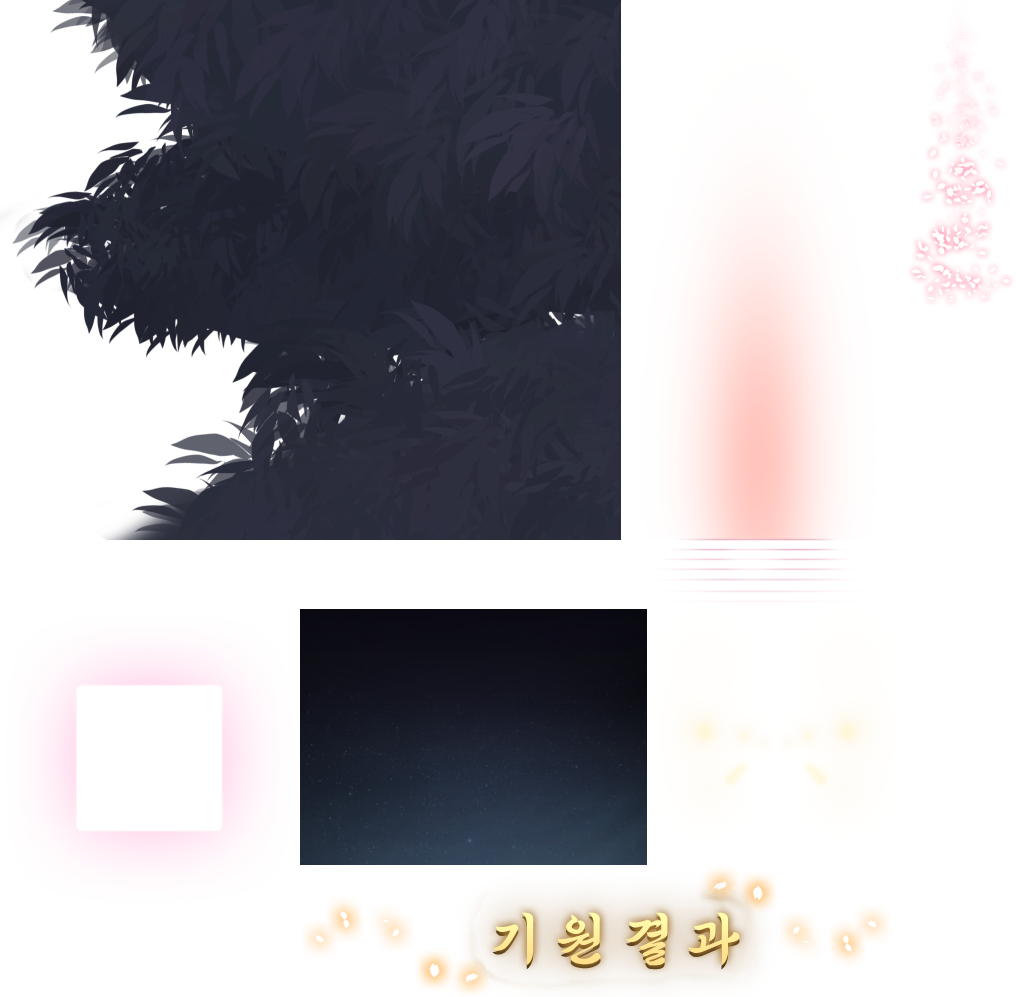
<style>
.page{position:relative;width:1016px;height:997px;background:#ffffff}
.page>*{position:absolute;margin:0}
.t1{font:56.9px "SolmoeKimDaeGeonM";letter-spacing:0.27em;color:#ffed9b}
</style>
<div class="page">
<p class="t1" style="left:492px;top:912px;width:248px;height:54px">기원결과</p>
</div>
